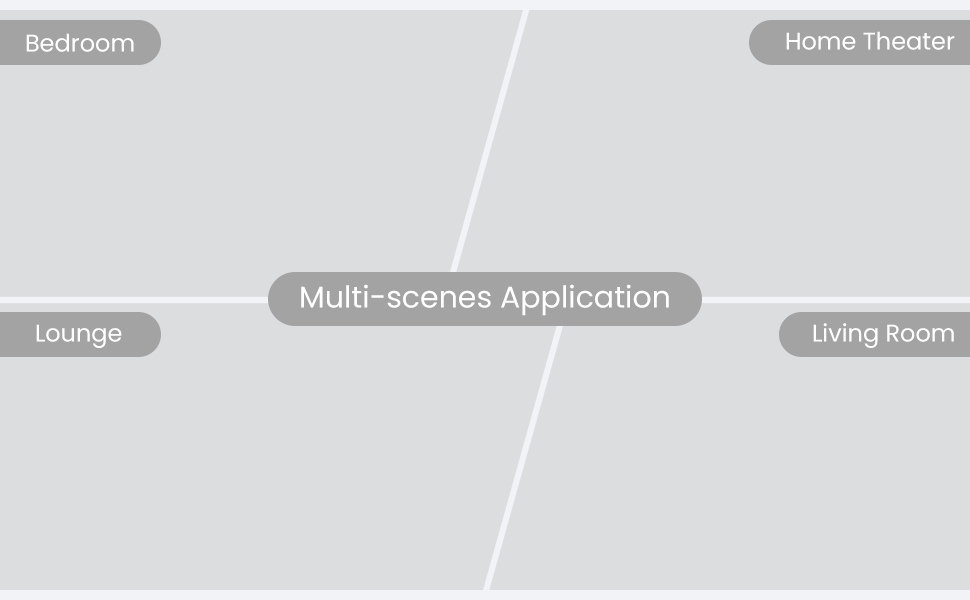
<style>
.page{position:relative;width:970px;height:600px;background:#dcdddf}
.page>*{position:absolute;margin:0}
.t1{font:24px "Poppins-Regular";color:#ffffff}
.t2{font:30px "Poppins-Regular";color:#ffffff}
</style>
<div class="page">
<p class="t1" style="left:26px;top:33px;width:108px;height:19px">Bedroom</p>
<p class="t1" style="left:786px;top:31px;width:169px;height:19px">Home Theater</p>
<p class="t2" style="left:301px;top:284px;width:368px;height:32px">Multi-scenes Application</p>
<p class="t1" style="left:36px;top:324px;width:86px;height:24px">Lounge</p>
<p class="t1" style="left:813px;top:323px;width:141px;height:25px">Living Room</p>
</div>
